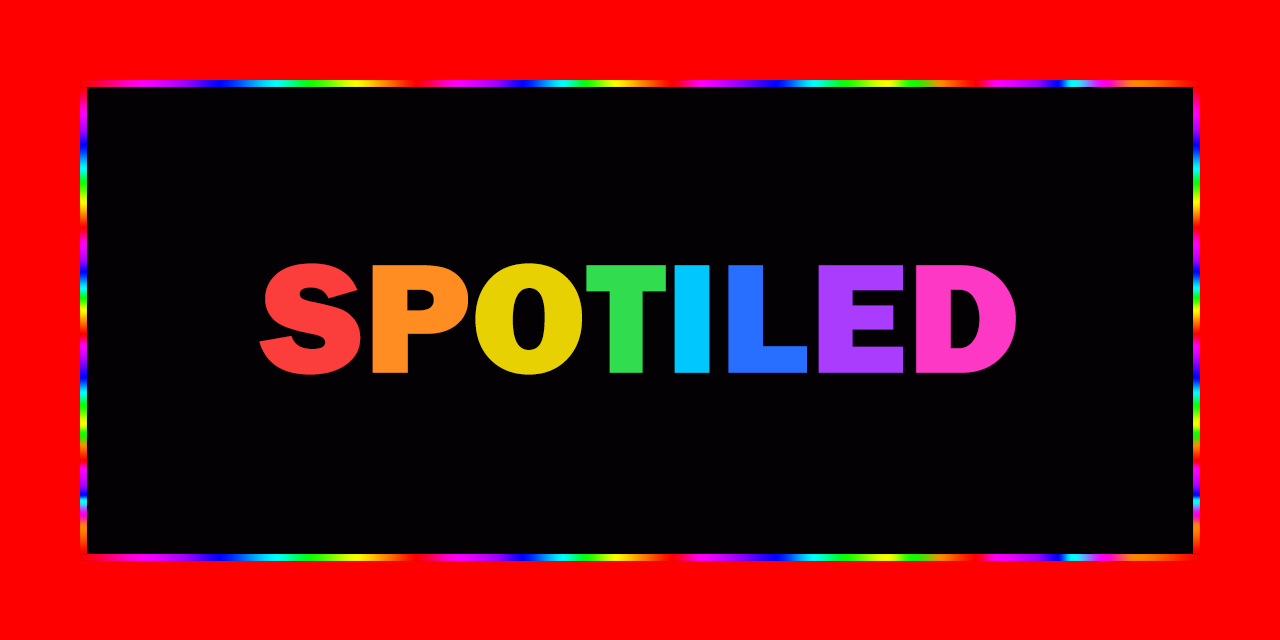
<style>
.page{position:relative;width:1280px;height:640px;background:#030104}
.page>*{position:absolute;margin:0}
.t1{font:276.1px "FranklinGothic-Heavy";color:#fb3d3b;scale:1.04 1}
.t2{font:276.1px "FranklinGothic-Heavy";color:#ff8d21;scale:1.04 1}
.t3{font:276.1px "FranklinGothic-Heavy";color:#e7d103;scale:1.04 1}
.t4{font:276.1px "FranklinGothic-Heavy";color:#32dc4f;scale:1.04 1}
.t5{font:276.1px "FranklinGothic-Heavy";color:#00c7fe;scale:1.04 1}
.t6{font:276.1px "FranklinGothic-Heavy";color:#286fff;scale:1.04 1}
.t7{font:276.1px "FranklinGothic-Heavy";color:#aa3cfd;scale:1.04 1}
.t8{font:276.1px "FranklinGothic-Heavy";color:#fd38c5;scale:1.04 1}
</style>
<div class="page">
<p class="t1" style="left:259px;top:263px;width:757px;height:112px">S<span class="t2">P</span><span class="t3">O</span><span class="t4">T</span><span class="t5">I</span><span class="t6">L</span><span class="t7">E</span><span class="t8">D</span></p>
</div>
